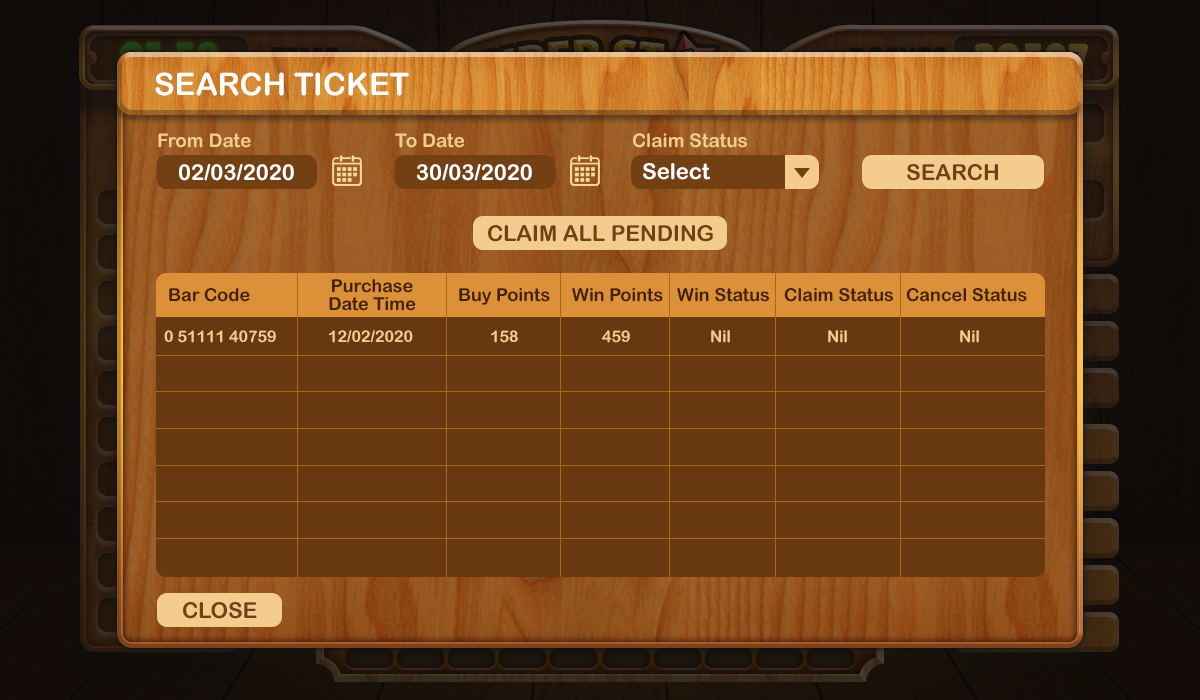
<style>
.page{position:relative;width:1200px;height:700px;background:#683910}
.page>*{position:absolute;margin:0}
.t1{font:31px "ArialRoundedMTBold";color:#ffffff;text-transform:uppercase}
.t2{font:19px "ArialRoundedMTBold";color:#f4cd8e}
.t3{font:22px "ArialRoundedMTBold";color:#ffffff}
.t4{font:22px "ArialRoundedMTBold";color:#734014}
.t5{font:18px/18px "ArialRoundedMTBold";color:#422307}
.t6{font:18px "ArialRoundedMTBold";color:#422307}
.t7{font:16px "ArialRoundedMTBold";color:#f4cd8e}
</style>
<div class="page">
<p class="t1" style="left:155px;top:72px;width:254px;height:24px">search ticket</p>
<p class="t2" style="left:158px;top:133px;width:93px;height:15px">From Date</p>
<p class="t2" style="left:395px;top:133px;width:69px;height:15px">To Date</p>
<p class="t2" style="left:633px;top:133px;width:114px;height:15px">Claim Status</p>
<p class="t3" style="left:179px;top:164px;width:115px;height:17px">02/03/2020</p>
<p class="t3" style="left:417px;top:164px;width:115px;height:17px">30/03/2020</p>
<p class="t3" style="left:643px;top:163px;width:67px;height:17px">Select</p>
<p class="t4" style="left:907px;top:164px;width:91px;height:17px">SEARCH</p>
<p class="t4" style="left:488px;top:225px;width:225px;height:17px">CLAIM ALL PENDING</p>
<p class="t5" style="left:329px;top:279px;width:87px;height:32px;text-align:center">Purchase<br>Date Time</p>
<p class="t6" style="left:169px;top:288px;width:81px;height:14px">Bar Code</p>
<p class="t6" style="left:459px;top:288px;width:91px;height:17px">Buy Points</p>
<p class="t6" style="left:572px;top:288px;width:91px;height:14px">Win Points</p>
<p class="t6" style="left:677px;top:288px;width:92px;height:14px">Win Status</p>
<p class="t6" style="left:784px;top:288px;width:109px;height:14px">Claim Status</p>
<p class="t6" style="left:906px;top:288px;width:121px;height:14px">Cancel Status</p>
<p class="t7" style="left:164px;top:330px;width:112px;height:13px">0 51111 40759</p>
<p class="t7" style="left:329px;top:330px;width:84px;height:13px">12/02/2020</p>
<p class="t7" style="left:491px;top:330px;width:27px;height:13px">158</p>
<p class="t7" style="left:602px;top:330px;width:28px;height:13px">459</p>
<p class="t7" style="left:711px;top:330px;width:19px;height:13px">Nil</p>
<p class="t7" style="left:828px;top:330px;width:19px;height:13px">Nil</p>
<p class="t7" style="left:960px;top:330px;width:19px;height:13px">Nil</p>
<p class="t4" style="left:183px;top:602px;width:74px;height:17px">CLOSE</p>
</div>
